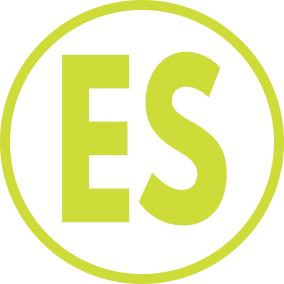
<style>
.page{position:relative;width:284px;height:284px;background:#ffffff}
.page>*{position:absolute;margin:0}
.t1{font:223px "SpartanMB-ExtraBold";color:#cddc39;scale:0.7 1}
</style>
<div class="page">
<p class="t1" style="left:62px;top:51px;width:165px;height:175px">ES</p>
</div>
